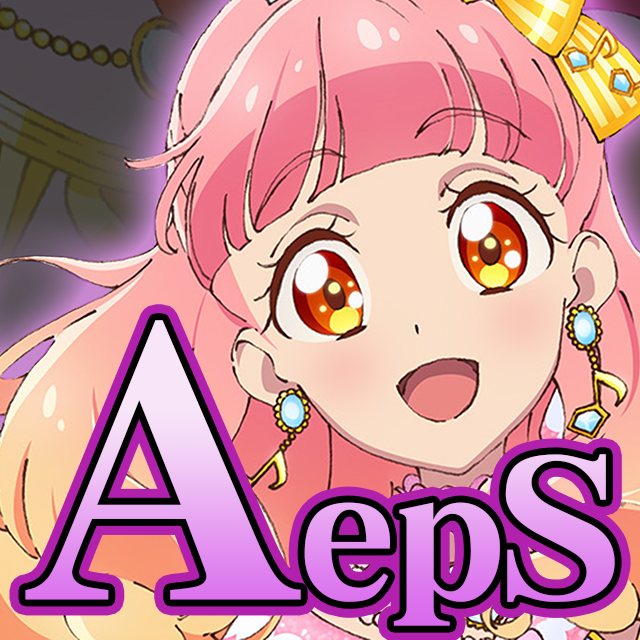
<style>
.page{position:relative;width:640px;height:640px}
.page>*{position:absolute;margin:0}
.t1{font:189px "DFLeiGaSo-W9-WINP-RKSJ-H";letter-spacing:0.005em}
.t2{font:378px "DFLeiGaSo-W9-WINP-RKSJ-H";letter-spacing:0.005em}
.t3{font:196px "DFLeiGaSo-W9-WINP-RKSJ-H";letter-spacing:0.005em}
</style>
<div class="page">
<p class="t1" style="left:25px;top:320px;width:590px;height:306px"><span class="t2">A</span>ep<span class="t3">S</span></p>
<p class="t1" style="left:25px;top:320px;width:590px;height:306px"><span class="t2">A</span>ep<span class="t3">S</span></p>
</div>
